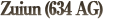
<style>
.page{position:relative;width:120px;height:19px;background:#ffffff}
.page>*{position:absolute;margin:0}
.t1{font:18px "RyuminPro-ExBold";letter-spacing:-0.08em;color:#4a3f32;font-weight:bold;scale:0.9 1}
</style>
<div class="page">
<p class="t1" style="left:0px;top:0px;width:103px;height:19px">Zuiun (634 AG)</p>
</div>
